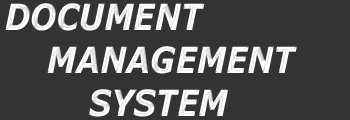
<style>
.page{position:relative;width:350px;height:120px;background:#333333}
.page>*{position:absolute;margin:0}
.t1{font:36px "Verdana-BoldItalic";color:#ffffff;scale:0.86 1}
</style>
<div class="page">
<p class="t1" style="left:5px;top:3px;width:292px;height:114px">DOCUMENT<br>    MANAGEMENT<br>        SYSTEM</p>
</div>
